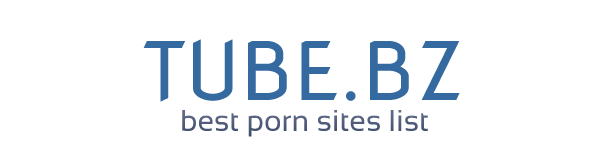
<style>
.page{position:relative;width:597px;height:150px;background:#ffffff}
.page>*{position:absolute;margin:0}
.t1{font:80px "NovaFlat";color:#356aa0}
.t2{font:30px "Sansation-Regular";color:#515d7b}
</style>
<div class="page">
<p class="t1" style="left:143px;top:39px;width:317px;height:63px">TUBE.BZ</p>
<p class="t2" style="left:182px;top:110px;width:246px;height:27px">best porn sites list</p>
</div>
